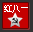
<style>
.page{position:relative;width:33px;height:32px;background:#c50000}
.page>*{position:absolute;margin:0}
.t1{font:10.4px "SimSun";letter-spacing:-0.25em;color:#ffffff}
</style>
<div class="page">
<p class="t1" style="left:4px;top:5px;width:24px;height:8px">红八一</p>
</div>
